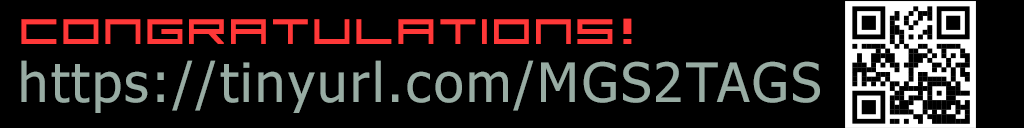
<style>
.page{position:relative;width:1024px;height:128px;background:#000000}
.page>*{position:absolute;margin:0}
.t1{font:28.6px "MGS2-Working";letter-spacing:0.265em;color:#ff3838;scale:0.93 1}
.t2{font:29.1px "MGS2-Working";letter-spacing:0.265em;color:#ff3838;scale:1.04 1}
.t3{font:54.2px "Tahoma";letter-spacing:0.048em;color:#98aca3}
</style>
<div class="page">
<p class="t1" style="left:21px;top:19px;width:592px;height:25px">CONGRATULATIONS</p>
<p class="t2" style="left:623px;top:18px;width:9px;height:26px">!</p>
<p class="t3" style="left:21px;top:60px;width:799px;height:53px">https://tinyurl.com/MGS2TAGS</p>
</div>
